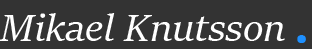
<style>
.page{position:relative;width:312px;height:49px;background:#333333}
.page>*{position:absolute;margin:0}
.t1{font:41.7px "SitkaHeading-Italic";color:#ffffff}
.t2{font:58.3px "SitkaHeading-Italic";color:#1e90ff;font-weight:bold}
</style>
<div class="page">
<p class="t1" style="left:0px;top:13px;width:306px;height:30px">Mikael Knutsson <span class="t2">.</span></p>
</div>
